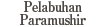
<style>
.page{position:relative;width:103px;height:27px;background:#ffffff}
.page>*{position:absolute;margin:0}
.t1{font:14px/13px "RyuminPro-ExBold";letter-spacing:-0.04em;color:#4c4843;scale:0.9 1}
</style>
<div class="page">
<p class="t1" style="left:19px;top:1px;width:67px;height:25px;text-align:center">Pelabuhan<br>Paramushir</p>
</div>
